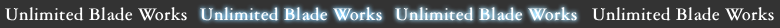
<style>
.page{position:relative;width:780px;height:28px;background:#333333}
.page>*{position:absolute;margin:0}
.t1{font:19px "AmericanGaramondBT-Roman";color:#ffffff;font-weight:bold}
</style>
<div class="page">
<p class="t1" style="left:5px;top:7px;width:182px;height:14px">Unlimited Blade Works</p>
<p class="t1" style="left:200px;top:7px;width:182px;height:14px">Unlimited Blade Works</p>
<p class="t1" style="left:395px;top:7px;width:182px;height:14px">Unlimited Blade Works</p>
<p class="t1" style="left:592px;top:7px;width:182px;height:14px">Unlimited Blade Works</p>
</div>
